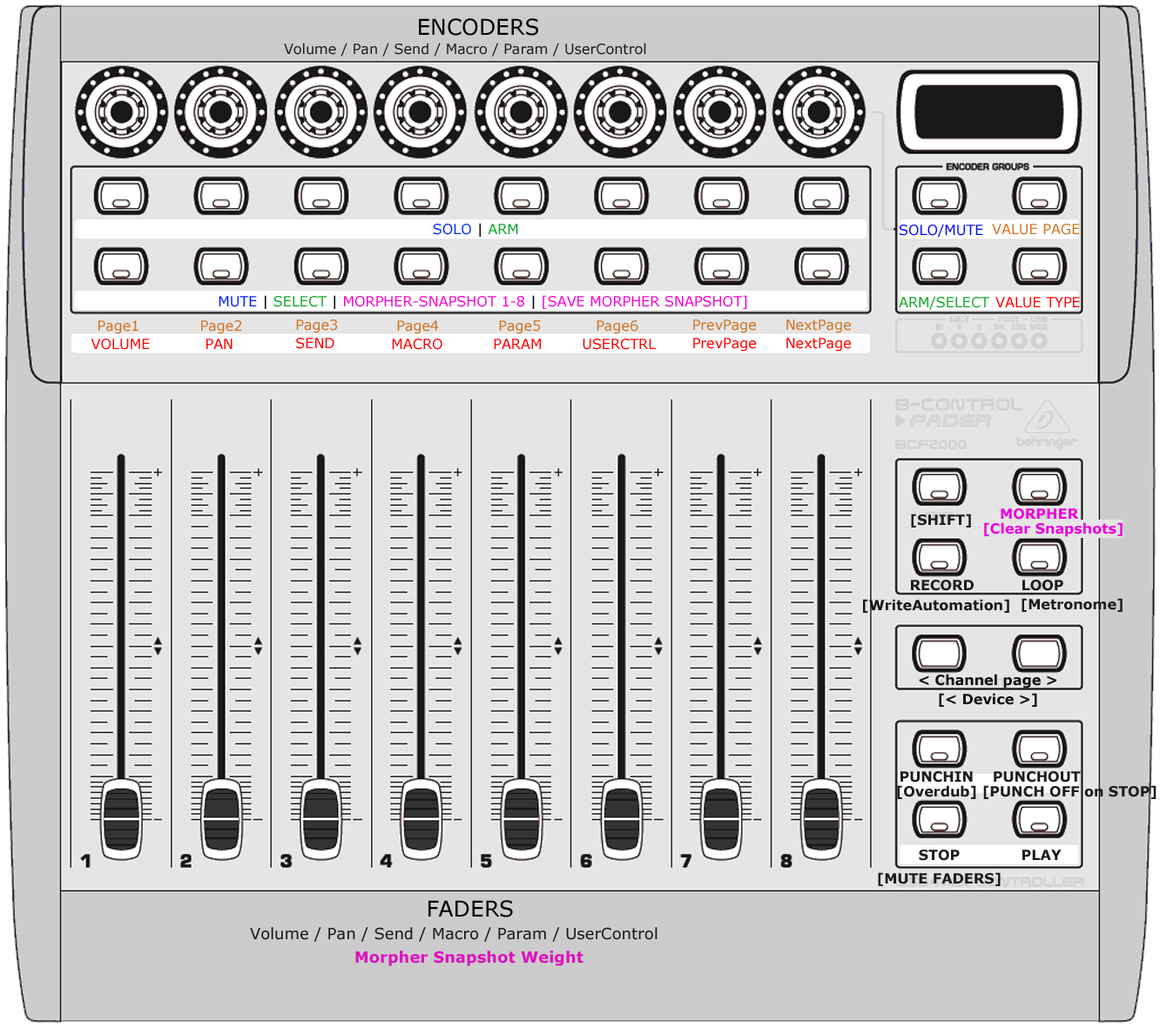
<style>
.page{position:relative;width:1160px;height:1028px;background:#e5e5e5}
.page>*{position:absolute;margin:0}
.t1{font:21.8px "Verdana";color:#000000}
.t2{font:13.9px "Verdana";color:#191919}
.t3{font:13.9px/36.3px "Verdana";color:#f600cb}
.t4{font:13.9px/36.3px "Verdana";color:#002aff}
.t5{font:13.9px/36.3px "Verdana";color:#000000}
.t6{font:13.9px/36.3px "Verdana";color:#0ea627}
.t7{font:13.9px/36.3px "Verdana";color:#001eff}
.t8{font:13.9px "Verdana";color:#000cf7}
.t9{font:13.9px "Verdana";color:#cf7220}
.t10{font:13.9px "Verdana";color:#0ea627}
.t11{font:13.9px "Verdana";color:#ff0000}
.t12{font:13.9px/14.5px "Verdana-Bold";color:#eb00dd}
.t13{font:13.9px "Verdana-Bold";color:#1a1e1b}
.t14{font:13.9px "Verdana-Bold";color:#191919}
.t15{font:13.9px/19.7px "Verdana-Bold";color:#0f110f}
.t16{font:13.9px/23.2px "Verdana-Bold";color:#1a1e1b}
.t17{font:15.7px "Verdana";color:#191919}
.t18{font:15.7px "Verdana-Bold";color:#dd14be}
</style>
<div class="page">
<p class="t1" style="left:419px;top:18px;width:119px;height:18px">ENCODERS</p>
<p class="t2" style="left:284px;top:43px;width:362px;height:14px">Volume / Pan / Send / Macro / Param / UserControl</p>
<p class="t3" style="left:219px;top:223px;width:528px;height:86px;text-align:center"><span class="t4">SOLO </span><span class="t5">|</span><span class="t6"> ARM<br><br></span><span class="t7">   MUTE </span><span class="t5">|</span><span class="t6"> SELECT </span><span class="t5">| </span>MORPHER-SNAPSHOT 1-8 <span class="t5">|</span> [SAVE MORPHER SNAPSHOT]</p>
<p class="t8" style="left:899px;top:224px;width:84px;height:14px">SOLO/MUTE</p>
<p class="t9" style="left:992px;top:224px;width:88px;height:11px">VALUE PAGE</p>
<p class="t10" style="left:899px;top:296px;width:90px;height:14px">ARM/SELECT</p>
<p class="t11" style="left:995px;top:297px;width:85px;height:11px">VALUE TYPE</p>
<p class="t9" style="left:98px;top:320px;width:40px;height:14px">Page1</p>
<p class="t9" style="left:201px;top:320px;width:41px;height:14px">Page2</p>
<p class="t9" style="left:296px;top:320px;width:41px;height:13px">Page3</p>
<p class="t9" style="left:397px;top:320px;width:42px;height:14px">Page4</p>
<p class="t9" style="left:499px;top:320px;width:41px;height:14px">Page5</p>
<p class="t9" style="left:596px;top:320px;width:42px;height:14px">Page6</p>
<p class="t9" style="left:693px;top:320px;width:63px;height:13px">PrevPage</p>
<p class="t9" style="left:786px;top:320px;width:65px;height:13px">NextPage</p>
<p class="t11" style="left:91px;top:339px;width:59px;height:11px">VOLUME</p>
<p class="t11" style="left:206px;top:339px;width:26px;height:10px">PAN</p>
<p class="t11" style="left:296px;top:338px;width:38px;height:11px">SEND</p>
<p class="t11" style="left:392px;top:339px;width:50px;height:11px">MACRO</p>
<p class="t11" style="left:494px;top:339px;width:47px;height:10px">PARAM</p>
<p class="t11" style="left:582px;top:339px;width:74px;height:11px">USERCTRL</p>
<p class="t11" style="left:693px;top:338px;width:63px;height:14px">PrevPage</p>
<p class="t11" style="left:786px;top:338px;width:65px;height:14px">NextPage</p>
<p class="t12" style="left:984px;top:508px;width:138px;height:29px;text-align:center">MORPHER<br>      [Clear Snapshots]</p>
<p class="t13" style="left:911px;top:514px;width:60px;height:14px">[SHIFT]</p>
<p class="t13" style="left:911px;top:580px;width:62px;height:11px">RECORD</p>
<p class="t13" style="left:1022px;top:580px;width:41px;height:11px">LOOP</p>
<p class="t14" style="left:863px;top:599px;width:146px;height:14px">[WriteAutomation]</p>
<p class="t13" style="left:1021px;top:598px;width:101px;height:14px">[Metronome]</p>
<p class="t15" style="left:919px;top:674px;width:137px;height:33px;text-align:center">&lt; Channel page &gt;<br>[&lt; Device &gt;]</p>
<p class="t13" style="left:900px;top:771px;width:180px;height:12px">PUNCHIN    PUNCHOUT</p>
<p class="t13" style="left:897px;top:785px;width:259px;height:14px">[Overdub] [PUNCH OFF on STOP]</p>
<p class="t16" style="left:878px;top:850px;width:122px;height:36px;text-align:center">STOP<br>[MUTE FADERS]</p>
<p class="t13" style="left:1022px;top:850px;width:39px;height:10px">PLAY</p>
<p class="t1" style="left:428px;top:900px;width:85px;height:18px">FADERS</p>
<p class="t17" style="left:250px;top:927px;width:407px;height:15px">Volume / Pan / Send / Macro / Param / UserControl</p>
<p class="t18" style="left:355px;top:951px;width:228px;height:15px">Morpher Snapshot Weight</p>
</div>
